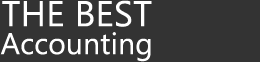
<style>
.page{position:relative;width:260px;height:62px;background:#333333}
.page>*{position:absolute;margin:0}
.t1{font:29.9px/27.8px "Ebrima";letter-spacing:0.008em;color:#ffffff}
.t2{font:35.8px/27.8px "Ebrima";letter-spacing:0.008em;color:#ffffff}
</style>
<div class="page">
<p class="t1" style="left:0px;top:0px;width:152px;height:62px;text-align:center"><span class="t2">THE BEST<br></span>Accounting</p>
</div>
